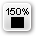
<style>
.page{position:relative;width:36px;height:36px}
.page>*{position:absolute;margin:0}
.t1{font:10px "ArialMT";letter-spacing:-0.05em;color:#000000}
</style>
<div class="page">
<p class="t1" style="left:6px;top:8px;width:23px;height:7px">150%</p>
</div>
